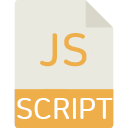
<style>
.page{position:relative;width:128px;height:128px;background:#e9e9e0}
.page>*{position:absolute;margin:0}
.t1{font:45.5px "NanumSquareRoundB";color:#eeaf4b}
.t2{font:28.6px "NanumSquareRoundB";color:#ffffff}
</style>
<div class="page">
<p class="t1" style="left:40px;top:33px;width:47px;height:34px">JS</p>
<p class="t2" style="left:17px;top:98px;width:96px;height:21px">SCRIPT</p>
</div>
